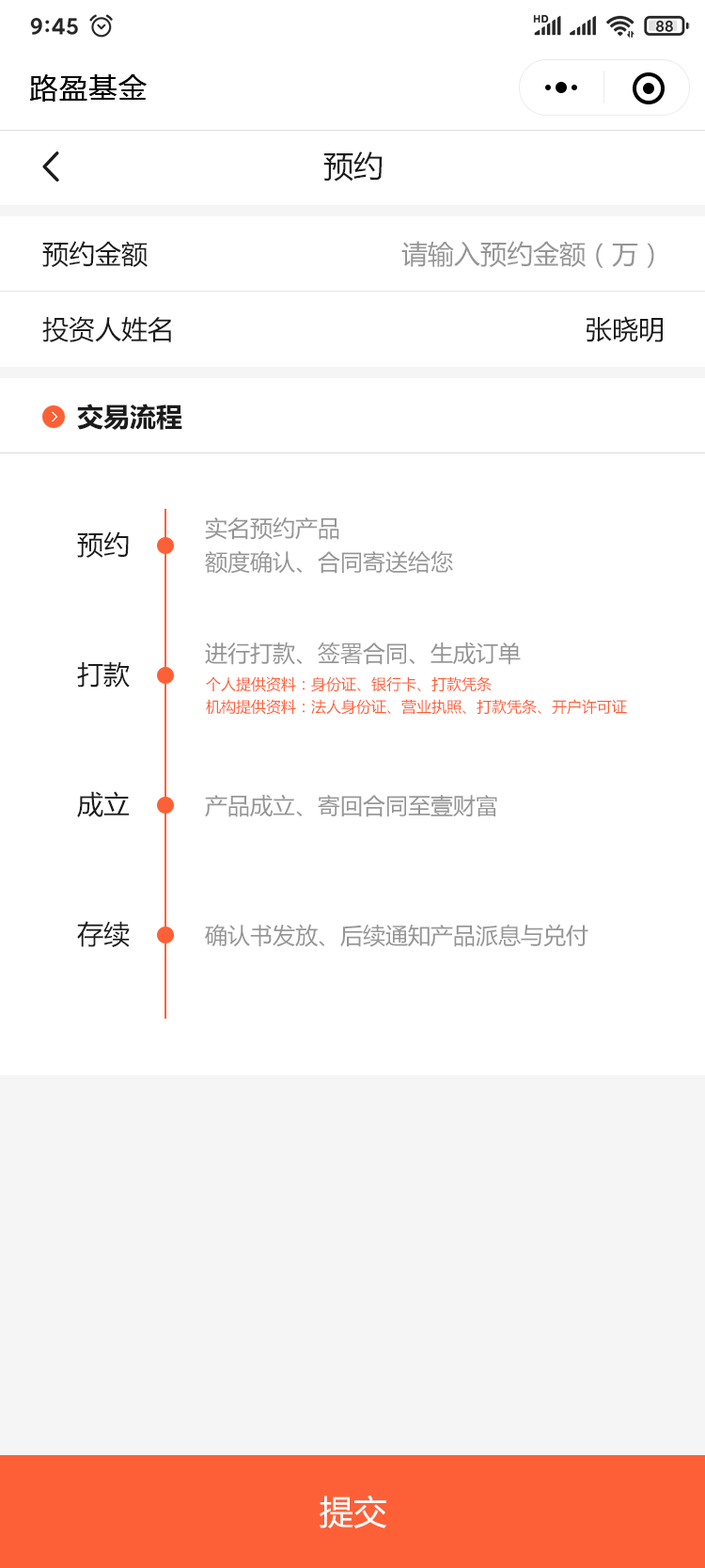
<style>
.page{position:relative;width:705px;height:1568px;background:#ffffff}
.page>*{position:absolute;margin:0}
.t1{font:28.2px "MicrosoftYaHei";letter-spacing:0.05em;color:#000000}
.t2{font:30.1px "MicrosoftYaHei";color:#1b1b1b}
.t3{font:26.3px/75.2px "MicrosoftYaHei";color:#1b1b1b}
.t4{font:26.3px/75.2px "MicrosoftYaHei";color:#959595}
.t5{font:26.3px "MicrosoftYaHei-Bold";color:#1b1b1b}
.t6{font:22.6px/33.9px "MicrosoftYaHei";color:#959595}
.t7{font:26.3px "MicrosoftYaHei";color:#1b1b1b}
.t8{font:22.6px "MicrosoftYaHei";color:#959595}
.t9{font:15px/22.6px "MicrosoftYaHei";color:#fd6036}
.t10{font:33.9px "MicrosoftYaHei";color:#ffffff}
</style>
<div class="page">
<p class="t1" style="left:29px;top:74px;width:118px;height:28px">路盈基金</p>
<p class="t2" style="left:324px;top:151px;width:59px;height:31px">预约</p>
<p class="t3" style="left:42px;top:241px;width:129px;height:101px">预约金额<br>投资人姓名</p>
<p class="t4" style="left:402px;top:241px;width:261px;height:101px;text-align:right">请输入预约金额（万）<br><span class="t3">张晓明</span></p>
<p class="t5" style="left:77px;top:404px;width:105px;height:26px">交易流程</p>
<p class="t6" style="left:205px;top:517px;width:248px;height:57px">实名预约产品<br>额度确认、合同寄送给您</p>
<p class="t7" style="left:77px;top:531px;width:52px;height:27px">预约</p>
<p class="t8" style="left:205px;top:641px;width:316px;height:24px">进行打款、签署合同、生成订单</p>
<p class="t7" style="left:77px;top:661px;width:53px;height:27px">打款</p>
<p class="t9" style="left:206px;top:676px;width:421px;height:39px">个人提供资料：身份证、银行卡、打款凭条<br>机构提供资料：法人身份证、营业执照、打款凭条、开户许可证</p>
<p class="t7" style="left:77px;top:791px;width:53px;height:26px">成立</p>
<p class="t8" style="left:205px;top:794px;width:293px;height:23px">产品成立、寄回合同至壹财富</p>
<p class="t7" style="left:77px;top:921px;width:53px;height:26px">存续</p>
<p class="t8" style="left:205px;top:924px;width:384px;height:23px">确认书发放、后续通知产品派息与兑付</p>
<p class="t10" style="left:320px;top:1495px;width:67px;height:33px">提交</p>
</div>
